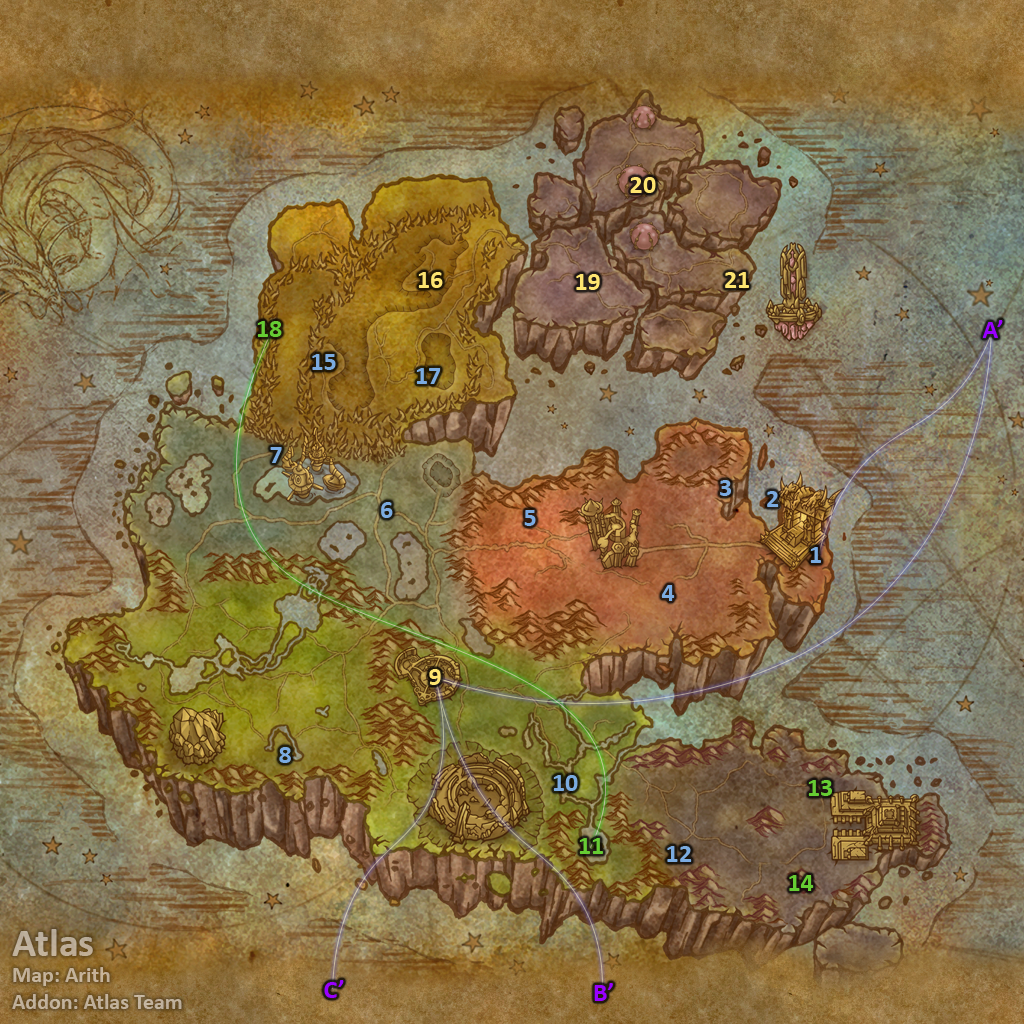
<style>
.page{position:relative;width:1024px;height:1024px}
.page>*{position:absolute;margin:0}
.t1{font:26px "Calibri-Bold";color:#fee570}
.t2{font:26px "Calibri-Bold";color:#66cc33}
.t3{font:26px "Calibri-Bold";color:#9900ff}
.t4{font:26px "Calibri-Bold";color:#7babe0}
.t5{font:22px "Calibri-Bold";color:#c0b09a}
.t6{font:40px "Calibri-Bold";color:#c0b09a}
</style>
<div class="page">
<p class="t1" style="left:630px;top:177px;width:26px;height:16px">20</p>
<p class="t1" style="left:418px;top:272px;width:25px;height:16px">16</p>
<p class="t1" style="left:576px;top:274px;width:24px;height:16px">19</p>
<p class="t1" style="left:725px;top:272px;width:24px;height:16px">21</p>
<p class="t2" style="left:257px;top:321px;width:25px;height:16px">18</p>
<p class="t3" style="left:982px;top:320px;width:21px;height:18px">A’</p>
<p class="t4" style="left:312px;top:354px;width:24px;height:16px">15</p>
<p class="t4" style="left:416px;top:368px;width:25px;height:16px">17</p>
<p class="t4" style="left:270px;top:447px;width:12px;height:16px">7</p>
<p class="t4" style="left:720px;top:480px;width:11px;height:16px">3</p>
<p class="t4" style="left:767px;top:491px;width:12px;height:16px">2</p>
<p class="t4" style="left:381px;top:502px;width:12px;height:16px">6</p>
<p class="t4" style="left:524px;top:510px;width:12px;height:16px">5</p>
<p class="t4" style="left:810px;top:547px;width:11px;height:16px">1</p>
<p class="t4" style="left:661px;top:585px;width:14px;height:16px">4</p>
<p class="t1" style="left:429px;top:669px;width:12px;height:16px">9</p>
<p class="t4" style="left:279px;top:747px;width:12px;height:16px">8</p>
<p class="t4" style="left:553px;top:775px;width:25px;height:16px">10</p>
<p class="t2" style="left:808px;top:780px;width:24px;height:16px">13</p>
<p class="t2" style="left:579px;top:838px;width:24px;height:16px">11</p>
<p class="t4" style="left:667px;top:846px;width:25px;height:16px">12</p>
<p class="t2" style="left:789px;top:875px;width:25px;height:16px">14</p>
<p class="t5" style="left:12px;top:929px;width:170px;height:80px"><span class="t6">Atlas<br></span>Map: Arith<br>Addon: Atlas Team</p>
<p class="t3" style="left:324px;top:980px;width:20px;height:18px">C’</p>
<p class="t3" style="left:594px;top:983px;width:19px;height:18px">B’</p>
</div>
